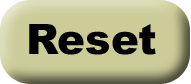
<style>
.page{position:relative;width:191px;height:84px;background:#cccc99}
.page>*{position:absolute;margin:0}
.t1{font:41.7px "Arial-Black";color:#000000}
</style>
<div class="page">
<p class="t1" style="left:29px;top:24px;width:127px;height:31px">Reset</p>
</div>
